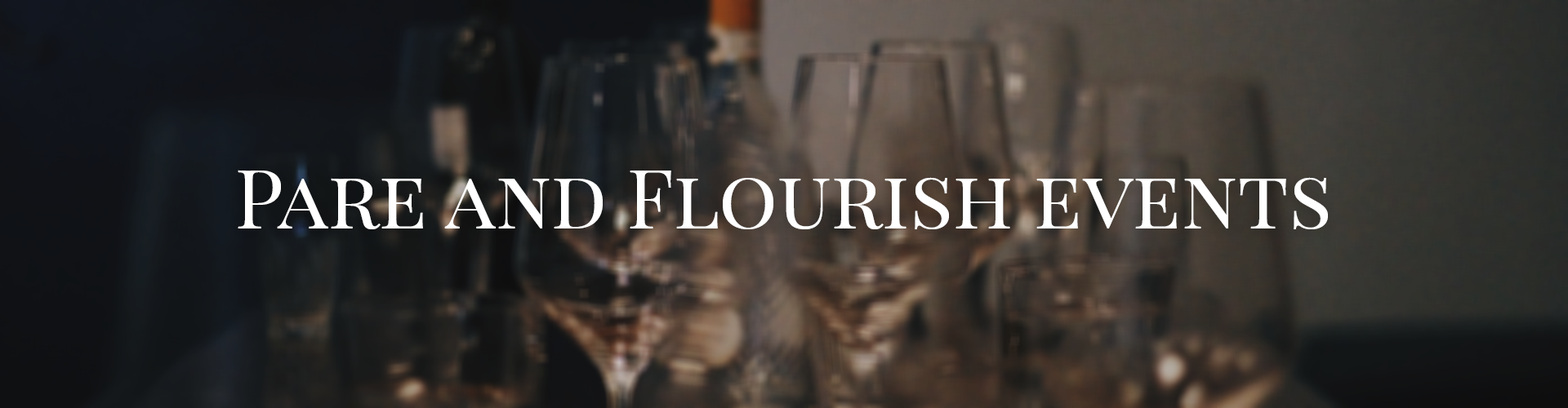
<style>
.page{position:relative;width:1568px;height:408px}
.page>*{position:absolute;margin:0}
.t1{font:81.7px "PlayfairDisplaySC-Regular";color:#ffffff}
</style>
<div class="page">
<p class="t1" style="left:238px;top:170px;width:1090px;height:59px">Pare and Flourish events</p>
</div>
